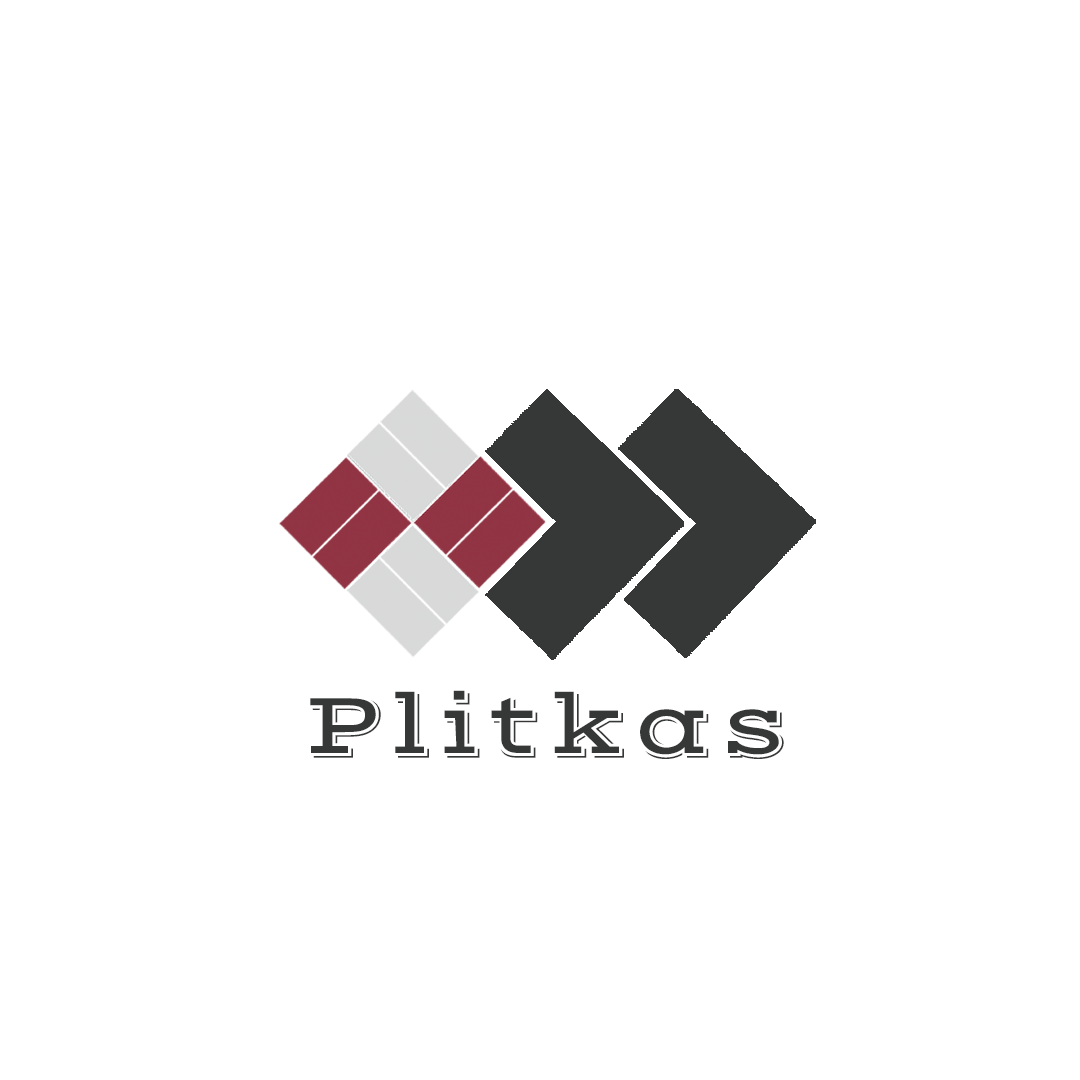
<style>
.page{position:relative;width:1080px;height:1080px;background:#ffffff}
.page>*{position:absolute;margin:0}
.t1{font:90px "VastShadow-Regular";letter-spacing:0.08em;color:#363737}
</style>
<div class="page">
<p class="t1" style="left:310px;top:690px;width:474px;height:69px">Plitkas</p>
</div>
